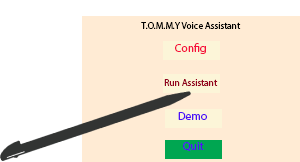
<style>
.page{position:relative;width:300px;height:162px;background:#ffebd4}
.page>*{position:absolute;margin:0}
.t1{font:9.5px "MyriadPro-Regular";color:#000000}
.t2{font:11.4px "MyriadPro-Regular";color:#f6113c}
.t3{font:9.5px "MyriadPro-Regular";color:#92031e}
.t4{font:11.4px "MyriadPro-Regular";color:#4d11f6}
</style>
<div class="page">
<p class="t1" style="left:141px;top:22px;width:100px;height:7px">T.O.M.M.Y Voice Assistant</p>
<p class="t2" style="left:175px;top:43px;width:31px;height:11px">Config</p>
<p class="t3" style="left:164px;top:79px;width:54px;height:7px">Run Assistant</p>
<p class="t4" style="left:178px;top:112px;width:29px;height:8px">Demo</p>
<p class="t4" style="left:183px;top:142px;width:21px;height:9px">Quit</p>
</div>
